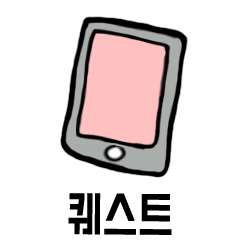
<style>
.page{position:relative;width:250px;height:250px;background:#ffffff}
.page>*{position:absolute;margin:0}
.t1{font:43.6px "BMDoHyeon";color:#000000;scale:0.84 1}
</style>
<div class="page">
<p class="t1" style="left:68px;top:193px;width:104px;height:42px">퀘스트</p>
</div>
